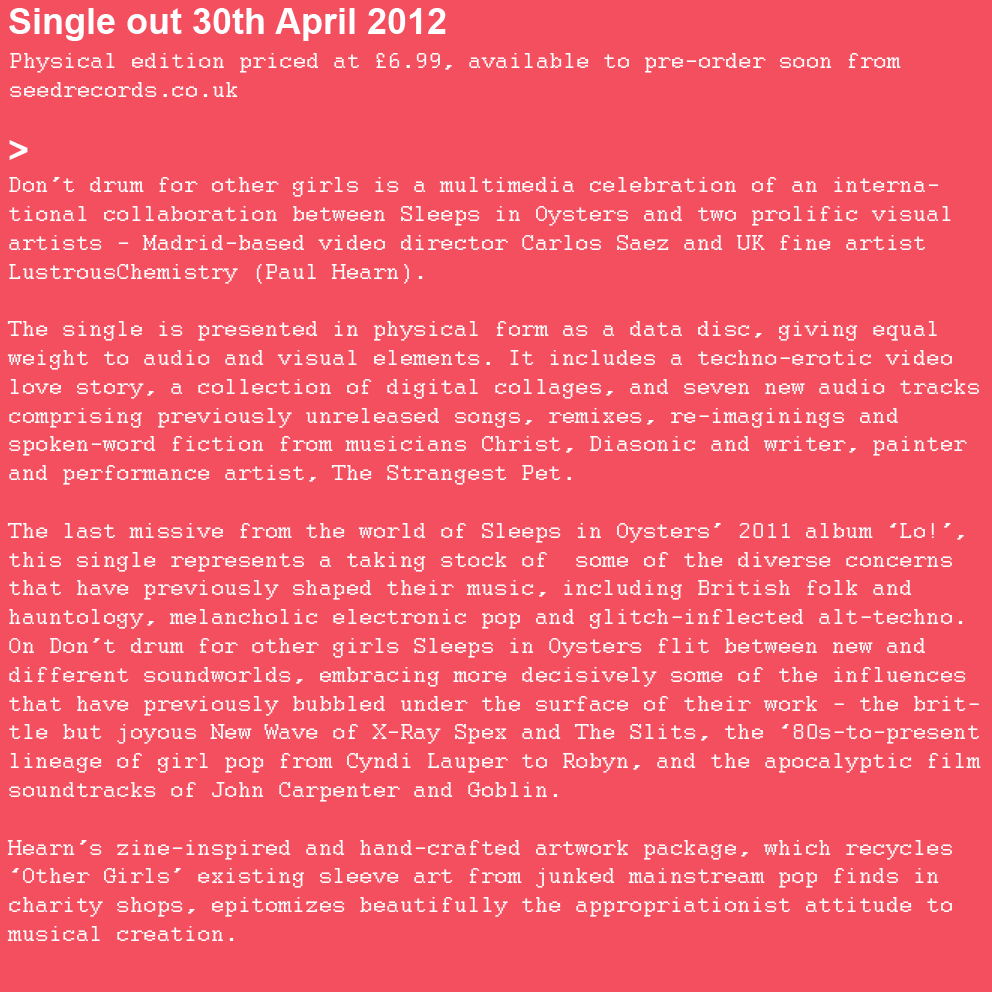
<style>
.page{position:relative;width:992px;height:992px;background:#f44f5f}
.page>*{position:absolute;margin:0}
.t1{font:24px "Courier";color:#ffffff}
.t2{font:36px "Arial-BoldMT";color:#ffffff}
</style>
<div class="page">
<p class="t1" style="left:7px;top:8px;width:974px;height:933px"><span class="t2">Single out 30th April 2012<br><br><br>&gt;<br></span>Don’t drum for other girls is a multimedia celebration of an international collaboration between Sleeps in Oysters and two prolific visual artists - Madrid-based video director Carlos Saez and UK fine artist LustrousChemistry (Paul Hearn). <br> <br>The single is presented in physical form as a data disc, giving equal weight to audio and visual elements. It includes a techno-erotic video love story, a collection of digital collages, and seven new audio tracks comprising previously unreleased songs, remixes, re-imaginings and spoken-word fiction from musicians Christ, Diasonic and writer, painter and performance artist, The Strangest Pet. <br><br>The last missive from the world of Sleeps in Oysters’ 2011 album ‘Lo!’, this single represents a taking stock of  some of the diverse concerns that have previously shaped their music, including British folk and hauntology, melancholic electronic pop and glitch-inflected alt-techno. On Don’t drum for other girls Sleeps in Oysters flit between new and different soundworlds, embracing more decisively some of the influences that have previously bubbled under the surface of their work - the brittle but joyous New Wave of X-Ray Spex and The Slits, the ‘80s-to-present lineage of girl pop from Cyndi Lauper to Robyn, and the apocalyptic film soundtracks of John Carpenter and Goblin. <br><br>Hearn’s zine-inspired and hand-crafted artwork package, which recycles ‘Other Girls’ existing sleeve art from junked mainstream pop finds in charity shops, epitomizes beautifully the appropriationist attitude to musical creation.</p>
<p class="t1" style="left:10px;top:53px;width:891px;height:44px">Physical edition priced at £6.99, available to pre-order soon from <br>seedrecords.co.uk</p>
</div>
